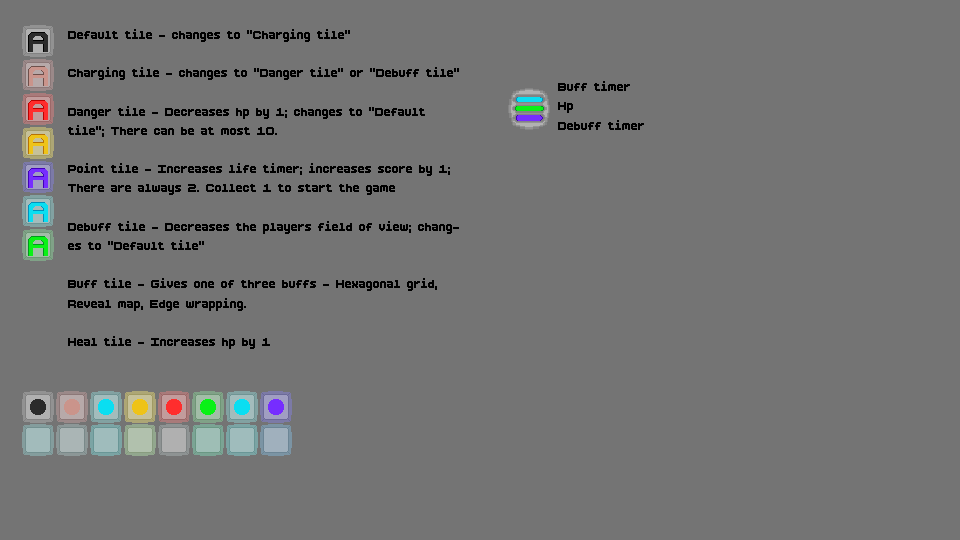
<style>
.page{position:relative;width:960px;height:540px;background:#747474}
.page>*{position:absolute;margin:0}
.t1{font:16px "BoldPixels";color:#000000}
</style>
<div class="page">
<p class="t1" style="left:68px;top:29px;width:391px;height:320px">Default tile - changes to “Charging tile” <br><br>Charging tile - changes to “Danger tile” or “Debuff tile”<br>  <br>Danger tile - Decreases hp by 1; changes to “Default tile”; There can be at most 10.<br><br>Point tile - Increases life timer; increases score by 1; There are always 2. Collect 1 to start the game<br><br>Debuff tile - Decreases the players field of view; changes to “Default tile”<br><br>Buff tile - Gives one of three buffs - Hexagonal grid, Reveal map, Edge wrapping.<br><br>Heal tile - Increases hp by 1</p>
<p class="t1" style="left:558px;top:81px;width:86px;height:49px">Buff timer<br>Hp<br>Debuff timer</p>
</div>
